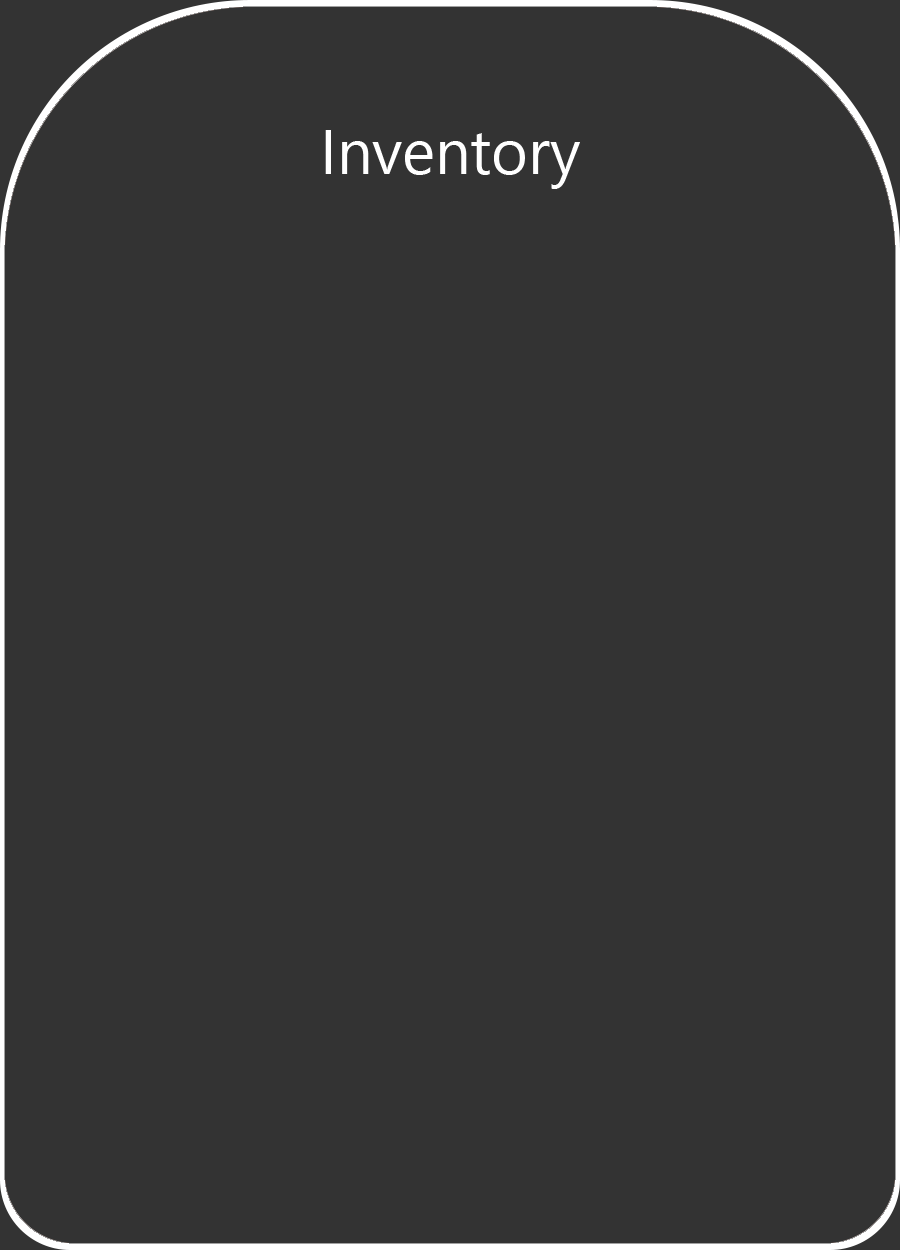
<style>
.page{position:relative;width:900px;height:1250px;background:#333333}
.page>*{position:absolute;margin:0}
.t1{font:62.5px "SegoeUI";color:#ffffff}
</style>
<div class="page">
<p class="t1" style="left:325px;top:130px;width:255px;height:59px">Inventory</p>
</div>
